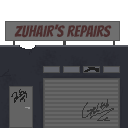
<style>
.page{position:relative;width:128px;height:128px;background:#2c2e36}
.page>*{position:absolute;margin:0}
.t1{font:16px "Bangers-Regular";letter-spacing:0.008em;color:#4c2e2e}
</style>
<div class="page">
<p class="t1" style="left:14px;top:24px;width:98px;height:14px">zuhair’s repairs</p>
</div>
